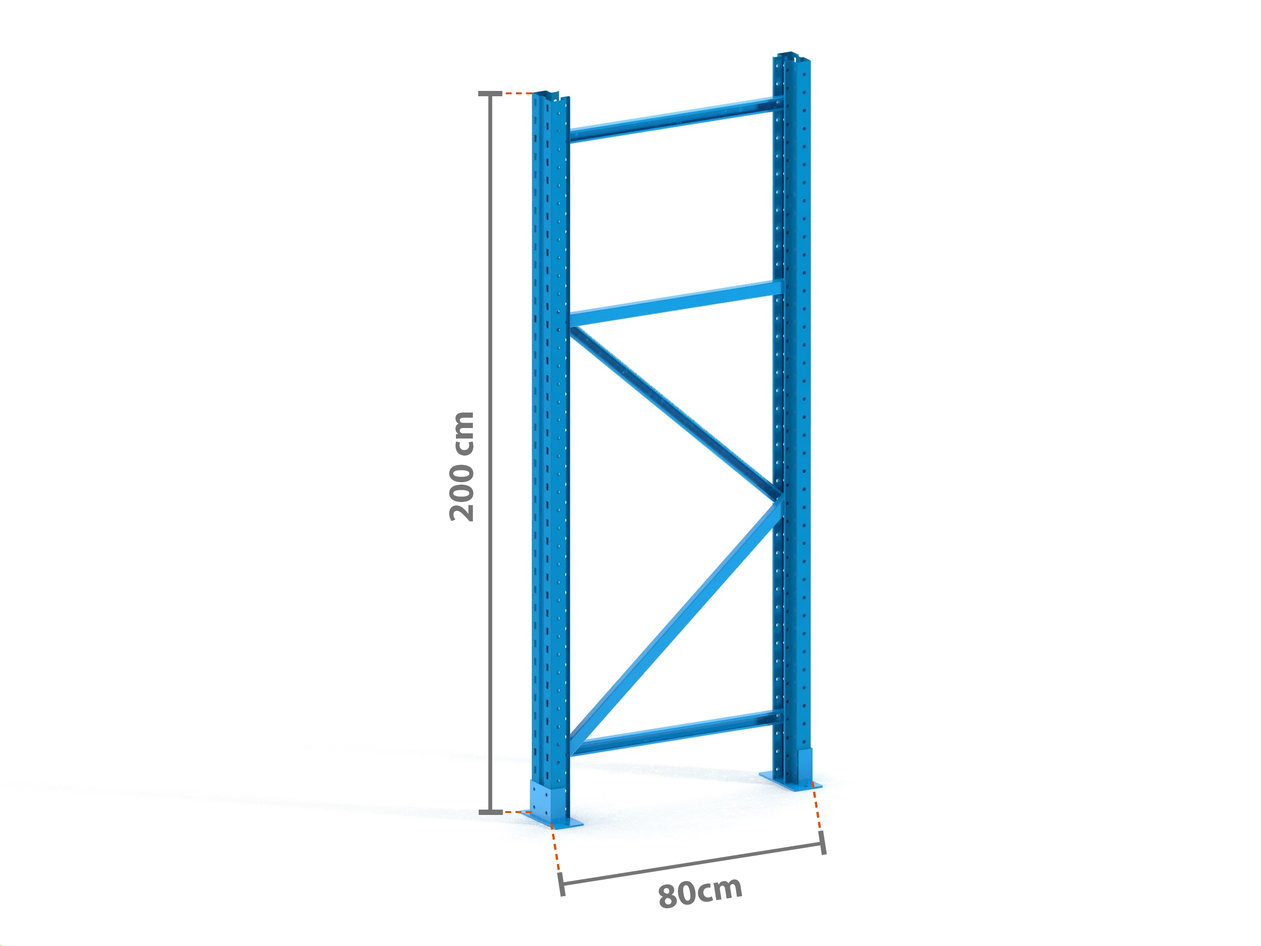
<style>
.page{position:relative;width:1261px;height:946px;background:#ffffff}
.page>*{position:absolute;margin:0}
.t1{font:35.5px "MyriadPro-Bold";color:#757575}
</style>
<div class="page">
<p class="t1" style="left:449px;top:412px;width:24px;height:109px;rotate:-90deg">200 cm</p>
<p class="t1" style="left:659px;top:879px;width:83px;height:29px;rotate:-9deg">80cm</p>
</div>
